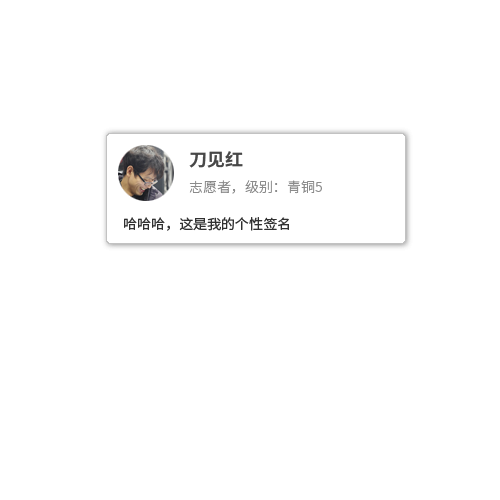
<style>
.page{position:relative;width:500px;height:500px;background:#ffffff}
.page>*{position:absolute;margin:0}
.t1{font:17.6px "NotoSansCJKsc-Bold";color:#484848}
.t2{font:13.7px "NotoSansCJKsc-Light";color:#8b8b8b}
.t3{font:13.7px "NotoSansCJKsc-Regular";color:#313131}
</style>
<div class="page">
<p class="t1" style="left:189px;top:151px;width:54px;height:17px">刀见红</p>
<p class="t2" style="left:189px;top:180px;width:133px;height:14px">志愿者，级别：青铜5</p>
<p class="t3" style="left:124px;top:217px;width:165px;height:14px">哈哈哈，这是我的个性签名</p>
</div>
